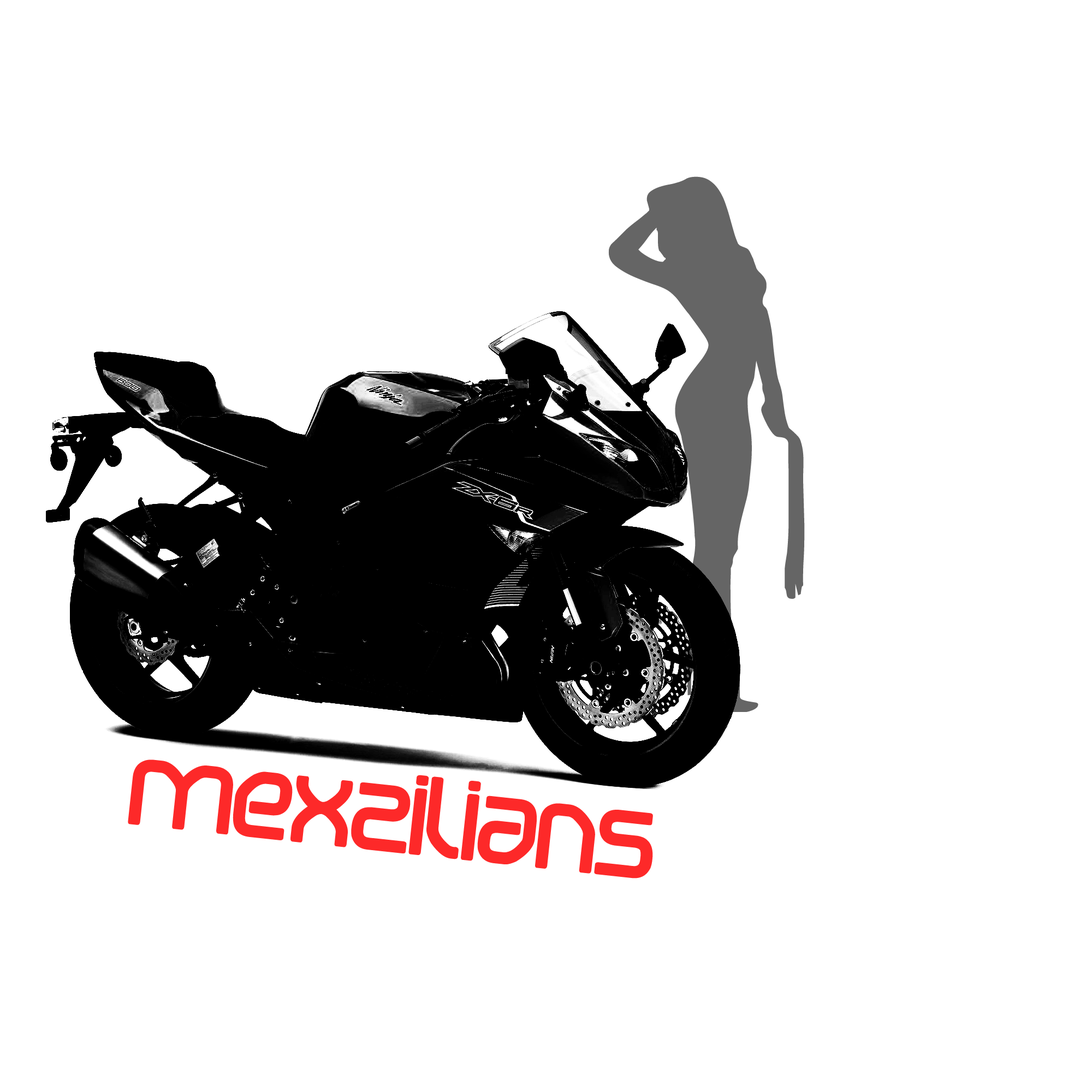
<style>
.page{position:relative;width:1092px;height:1092px;background:#ffffff}
.page>*{position:absolute;margin:0}
.t1{font:300.3px "QT's";color:#656565}
.t2{font:109.2px "betapoRt";color:#fd2929}
</style>
<div class="page">
<p class="t1" style="left:608px;top:176px;width:197px;height:536px">m</p>
<p class="t2" style="left:128px;top:759px;width:525px;height:120px;rotate:6deg">mexzilians</p>
</div>
